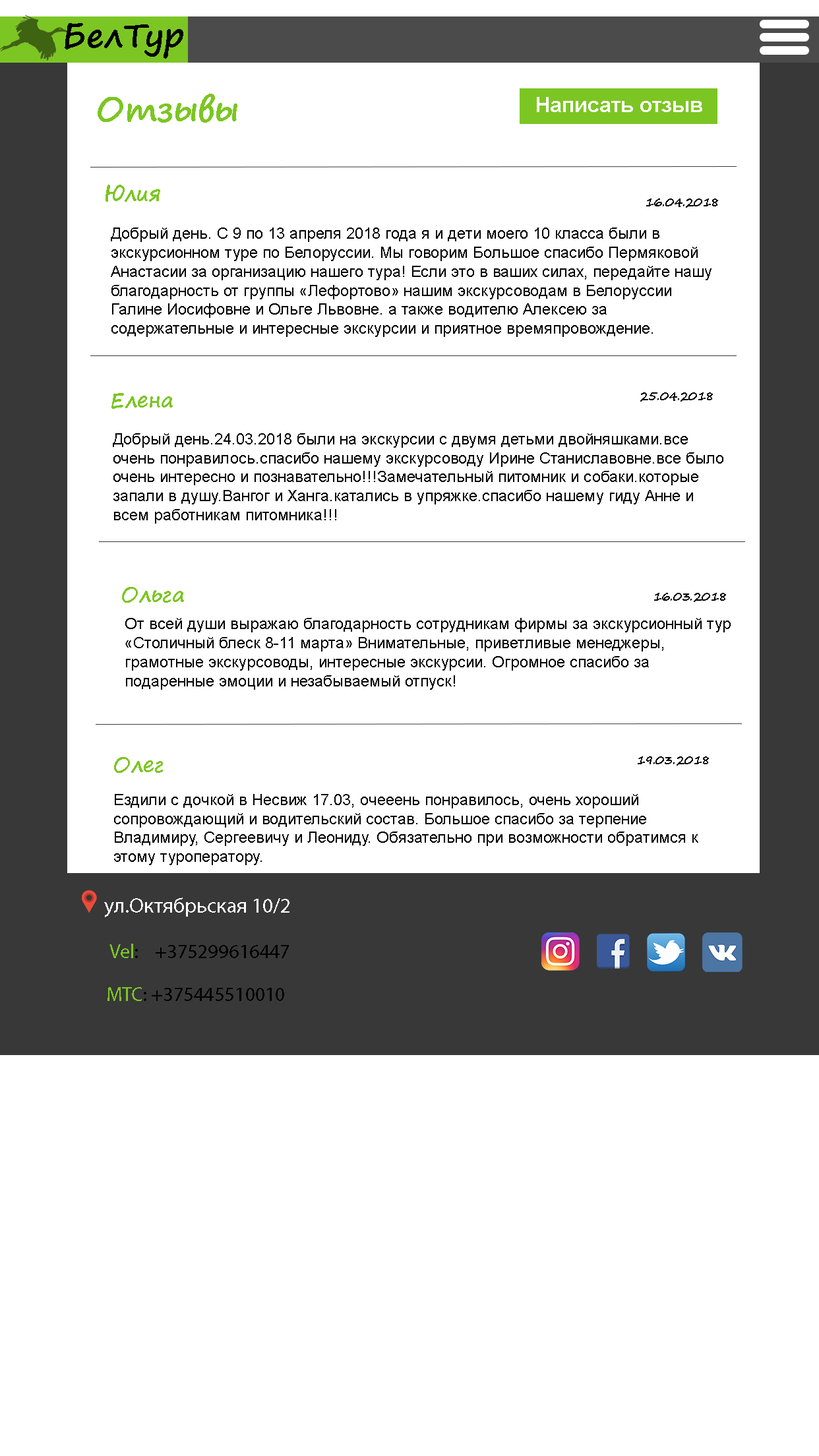
<style>
.page{position:relative;width:819px;height:1456px;background:#ffffff}
.page>*{position:absolute;margin:0}
.t1{font:33px "SegoePrint-Bold";color:#000000}
.t2{font:33px "SegoePrint-Bold";color:#7cc623}
.t3{font:21.1px "Arial-BoldMT";color:#ffffff}
.t4{font:21.1px "SegoePrint-Bold";color:#7cc623}
.t5{font:11.9px "SegoePrint-Bold";color:#000000}
.t6{font:15.8px "ArialMT";color:#000000}
.t7{font:11.9px "ArialMT";color:#000000}
</style>
<div class="page">
<p class="t1" style="left:65px;top:23px;width:118px;height:36px">БелТур</p>
<p class="t2" style="left:98px;top:94px;width:139px;height:29px">Отзывы</p>
<p class="t3" style="left:537px;top:97px;width:165px;height:15px">Написать отзыв</p>
<p class="t4" style="left:106px;top:185px;width:54px;height:17px">Юлия</p>
<p class="t5" style="left:646px;top:198px;width:72px;height:10px">16.04.2018</p>
<p class="t6" style="left:111px;top:227px;width:601px;height:110px">Добрый день. С 9 по 13 апреля 2018 года я и дети моего 10 класса были в экскурсионном туре по Белоруссии. Мы говорим Большое спасибо Пермяковой Анастасии за организацию нашего тура! Если это в ваших силах, передайте нашу благодарность от группы «Лефортово» нашим экскурсоводам в Белоруссии Галине Иосифовне и Ольге Львовне. а также водителю Алексею за содержательные и интересные экскурсии и приятное времяпровождение.</p>
<p class="t4" style="left:111px;top:393px;width:62px;height:16px">Елена</p>
<p class="t5" style="left:640px;top:392px;width:73px;height:10px">25.04.2018</p>
<p class="t6" style="left:113px;top:433px;width:610px;height:91px">Добрый день.24.03.2018 были на экскурсии с двумя детьми двойняшками.все очень понравилось.спасибо нашему экскурсоводу Ирине Станиславовне.все было очень интересно и познавательно!!!Замечательный питомник и собаки.которые запали в душу.Вангог и Ханга.катались в упряжке.спасибо нашему гиду Анне и всем работникам питомника!!!</p>
<p class="t4" style="left:122px;top:587px;width:62px;height:16px">Ольга</p>
<p class="t5" style="left:654px;top:593px;width:72px;height:9px">16.03.2018</p>
<p class="t6" style="left:125px;top:618px;width:606px;height:72px"><span class="t7"><br></span><br>От всей души выражаю благодарность сотрудникам фирмы за экскурсионный тур «Столичный блеск 8-11 марта» Внимательные, приветливые менеджеры, грамотные экскурсоводы, интересные экскурсии. Огромное спасибо за подаренные эмоции и незабываемый отпуск!</p>
<p class="t4" style="left:114px;top:757px;width:49px;height:16px">Олег</p>
<p class="t5" style="left:638px;top:756px;width:71px;height:10px">19.03.2018</p>
<p class="t6" style="left:114px;top:794px;width:584px;height:71px">Ездили с дочкой в Несвиж 17.03, очееень понравилось, очень хороший сопровождающий и водительский состав. Большое спасибо за терпение Владимиру, Сергеевичу и Леониду. Обязательно при возможности обратимся к этому туроператору.</p>
</div>
